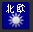
<style>
.page{position:relative;width:33px;height:32px;background:#000090}
.page>*{position:absolute;margin:0}
.t1{font:10.4px "SimSun";color:#ffffff}
</style>
<div class="page">
<p class="t1" style="left:6px;top:4px;width:19px;height:9px">北欧</p>
</div>
